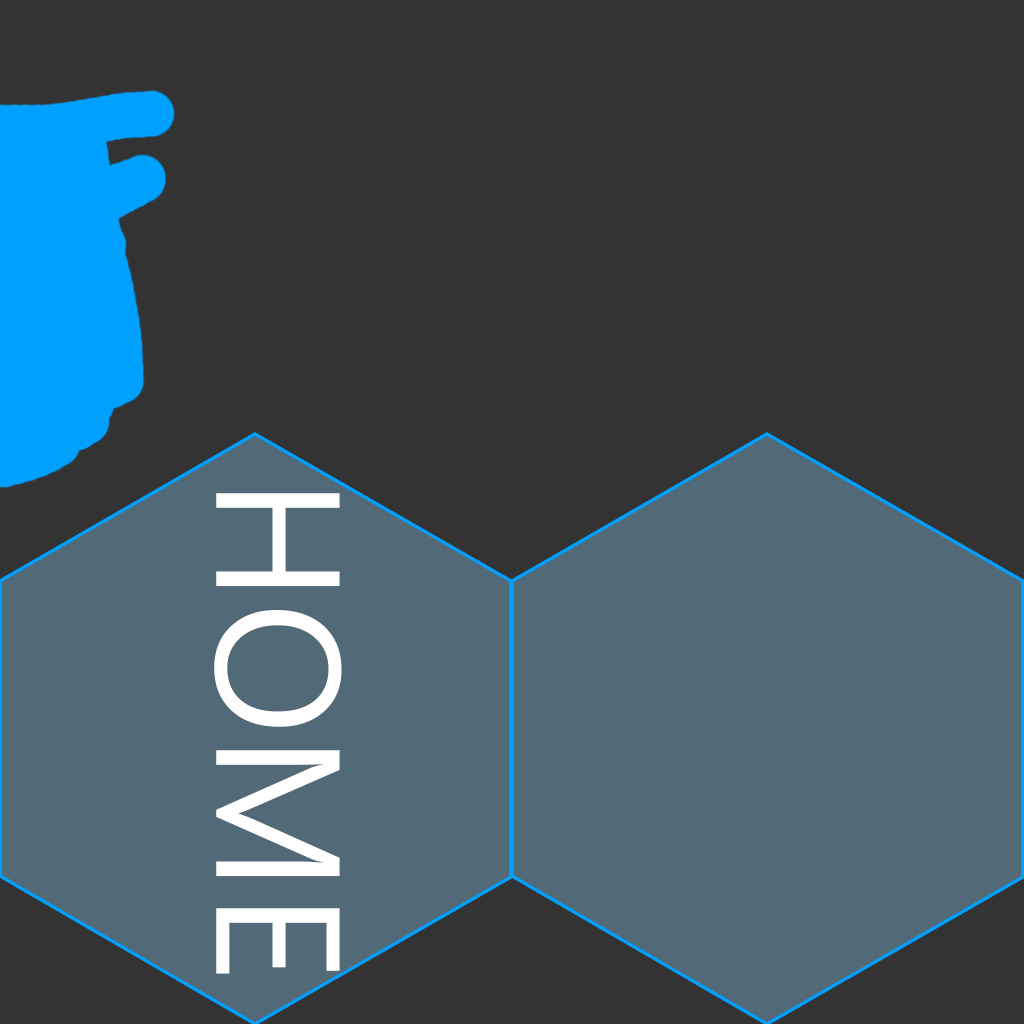
<style>
.page{position:relative;width:1024px;height:1024px;background:#333333}
.page>*{position:absolute;margin:0}
.t1{font:176px "SegoeUI";color:#ffffff}
</style>
<div class="page">
<p class="t1" style="left:214px;top:493px;width:128px;height:481px;rotate:90deg">HOME</p>
</div>
